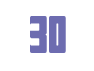
<style>
.page{position:relative;width:94px;height:71px;background:#ffffff}
.page>*{position:absolute;margin:0}
.t1{font:50px "Far-Out!";color:#6d6cb0}
</style>
<div class="page">
<p class="t1" style="left:30px;top:16px;width:36px;height:37px">30</p>
</div>
